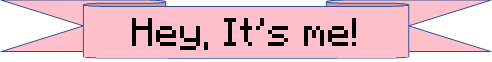
<style>
.page{position:relative;width:492px;height:62px;background:#ffc0cb}
.page>*{position:absolute;margin:0}
.t1{font:40px "MinecraftSeven";color:#000000}
</style>
<div class="page">
<p class="t1" style="left:132px;top:18px;width:224px;height:32px">Hey, It’s me!</p>
</div>
